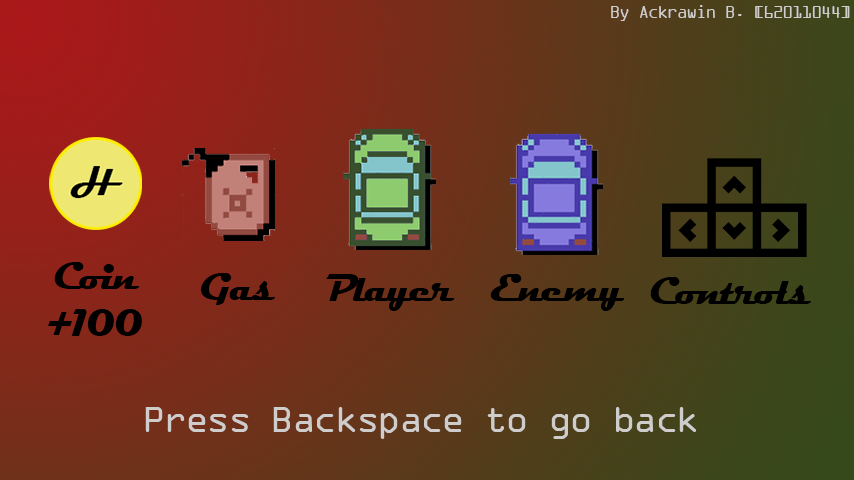
<style>
.page{position:relative;width:854px;height:480px}
.page>*{position:absolute;margin:0}
.t1{font:17.5px "OCRAExtended";letter-spacing:-0.055em;color:#cfcccc}
.t2{font:38.9px "Magneto-Bold";letter-spacing:-0.055em;color:#000000}
.t3{font:38.9px "OCRAExtended";letter-spacing:-0.055em;color:#cfcccc}
</style>
<div class="page">
<p class="t1" style="left:611px;top:5px;width:239px;height:16px">By Ackrawin B. [62011044]</p>
<p class="t2" style="left:48px;top:262px;width:94px;height:74px;text-align:center">Coin<br>+100</p>
<p class="t2" style="left:201px;top:273px;width:74px;height:32px">Gas</p>
<p class="t2" style="left:326px;top:274px;width:129px;height:37px">Player</p>
<p class="t2" style="left:490px;top:274px;width:134px;height:37px">Enemy</p>
<p class="t2" style="left:650px;top:277px;width:161px;height:27px">Controls</p>
<p class="t3" style="left:145px;top:407px;width:552px;height:32px">Press Backspace to go back</p>
</div>
